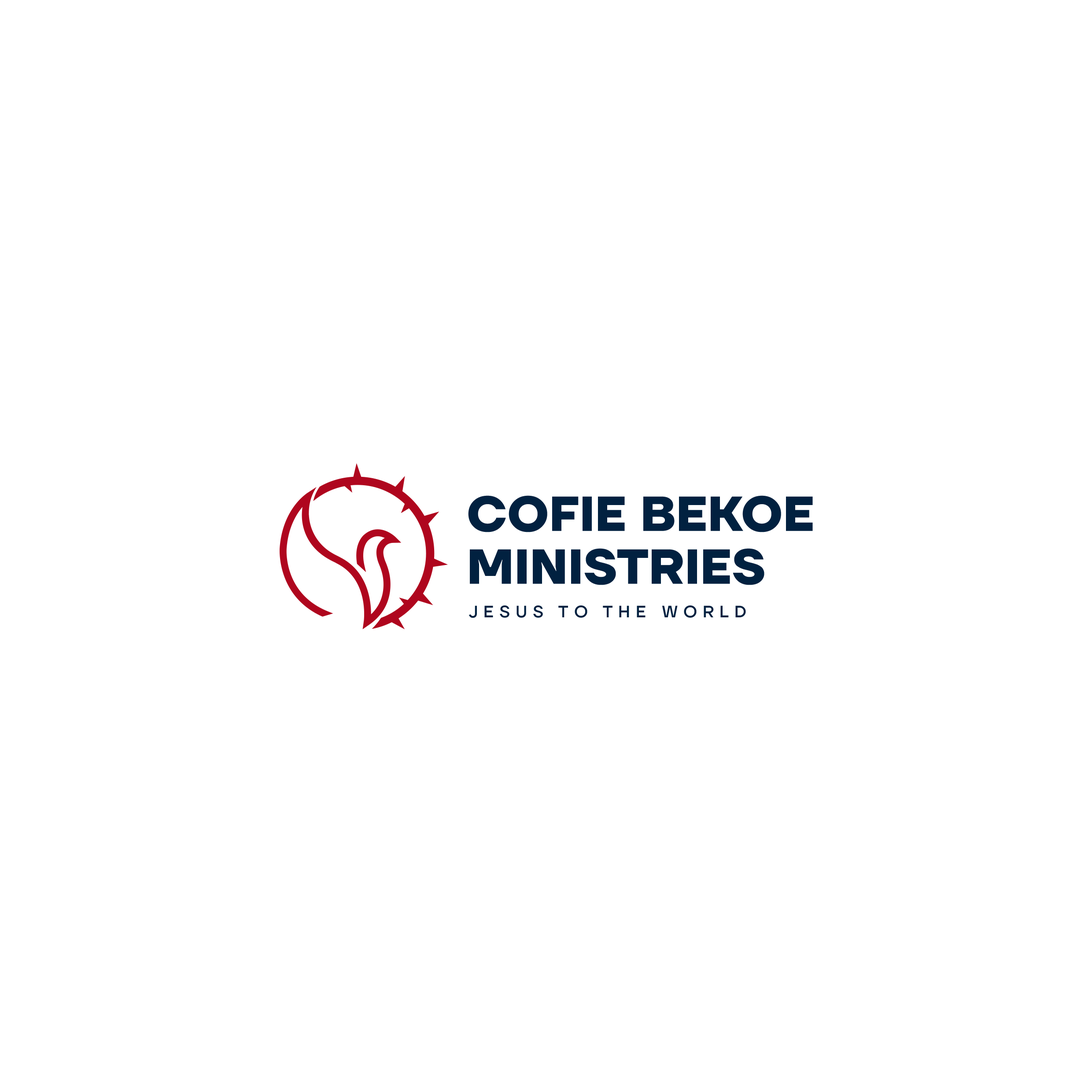
<style>
.page{position:relative;width:1092px;height:1092px;background:#ffffff}
.page>*{position:absolute;margin:0}
.t1{font:49px/53.1px "TTFirsNeue-Bold";color:#012140}
.t2{font:16.5px "TTFirsNeue-Medium";letter-spacing:0.34em;color:#012140}
</style>
<div class="page">
<p class="t1" style="left:468px;top:495px;width:345px;height:90px">COFIE BEKOE<br>MINISTRIES</p>
<p class="t2" style="left:469px;top:605px;width:277px;height:13px">JESUS TO THE WORLD</p>
</div>
